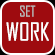
<style>
.page{position:relative;width:55px;height:55px;background:#9e0b0f}
.page>*{position:absolute;margin:0}
.t1{font:14.2px "AgencyFB-Reg";color:#b8b8b8}
.t2{font:24px "AgencyFB-Reg";color:#ffffff}
</style>
<div class="page">
<p class="t1" style="left:20px;top:5px;width:16px;height:12px">SET</p>
<p class="t2" style="left:6px;top:22px;width:43px;height:19px">WORK</p>
</div>
